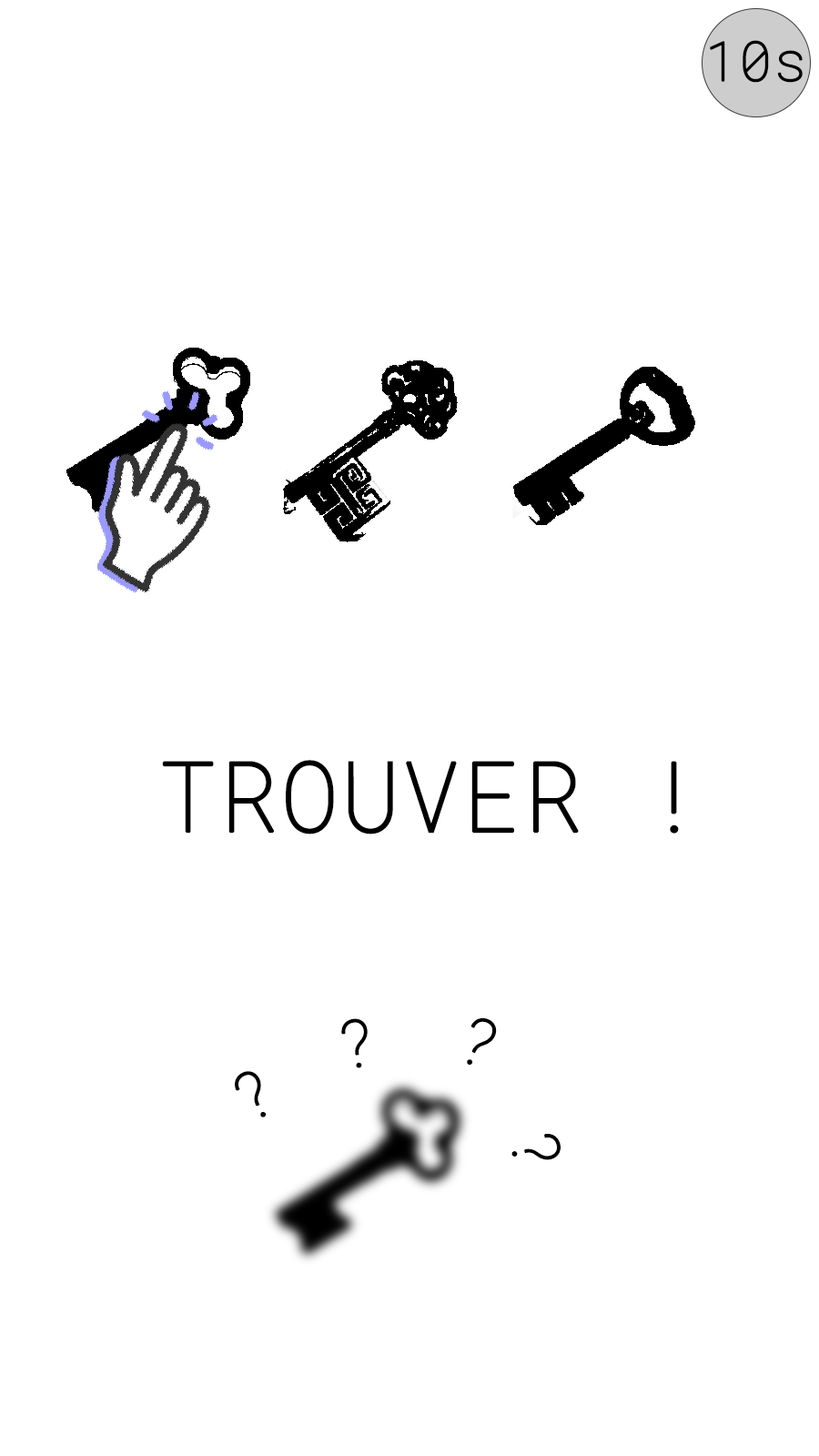
<style>
.page{position:relative;width:819px;height:1456px;background:#ffffff}
.page>*{position:absolute;margin:0}
.t1{font:97.1px "RobotoMono-Thin";color:#000000;font-weight:bold}
.t2{font:65.5px "RobotoMono-Thin";color:#000000;font-weight:bold}
</style>
<div class="page">
<p class="t1" style="left:162px;top:760px;width:517px;height:74px">TROUVER !</p>
<p class="t2" style="left:341px;top:1018px;width:27px;height:50px;rotate:-9deg">?</p>
<p class="t2" style="left:467px;top:1017px;width:30px;height:48px;rotate:22deg">?</p>
<p class="t2" style="left:235px;top:1071px;width:31px;height:46px;rotate:-28deg">?</p>
<p class="t2" style="left:511px;top:1134px;width:50px;height:26px;rotate:77deg">?</p>
</div>
